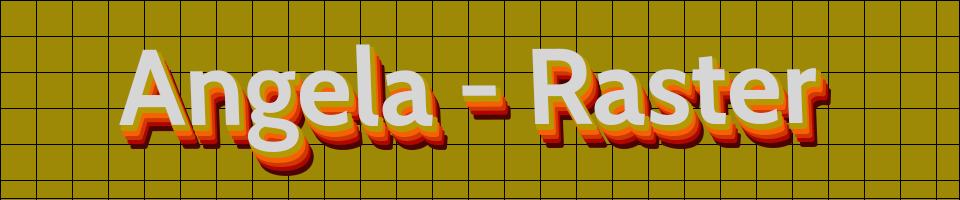
<style>
.page{position:relative;width:960px;height:200px;background:#9d8906}
.page>*{position:absolute;margin:0}
.t1{font:107.2px "Cabin-Bold";color:#d6d6d6}
</style>
<div class="page">
<p class="t1" style="left:119px;top:44px;width:698px;height:108px">Angela - Raster</p>
</div>
